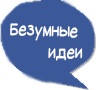
<style>
.page{position:relative;width:96px;height:90px;background:#3b5998}
.page>*{position:absolute;margin:0}
.t1{font:18px "SuplexmentaryComicNC";color:#ffffff;scale:0.8 1}
</style>
<div class="page">
<p class="t1" style="left:10px;top:23px;width:73px;height:38px;rotate:2deg">Безумные<br>  идеи</p>
</div>
